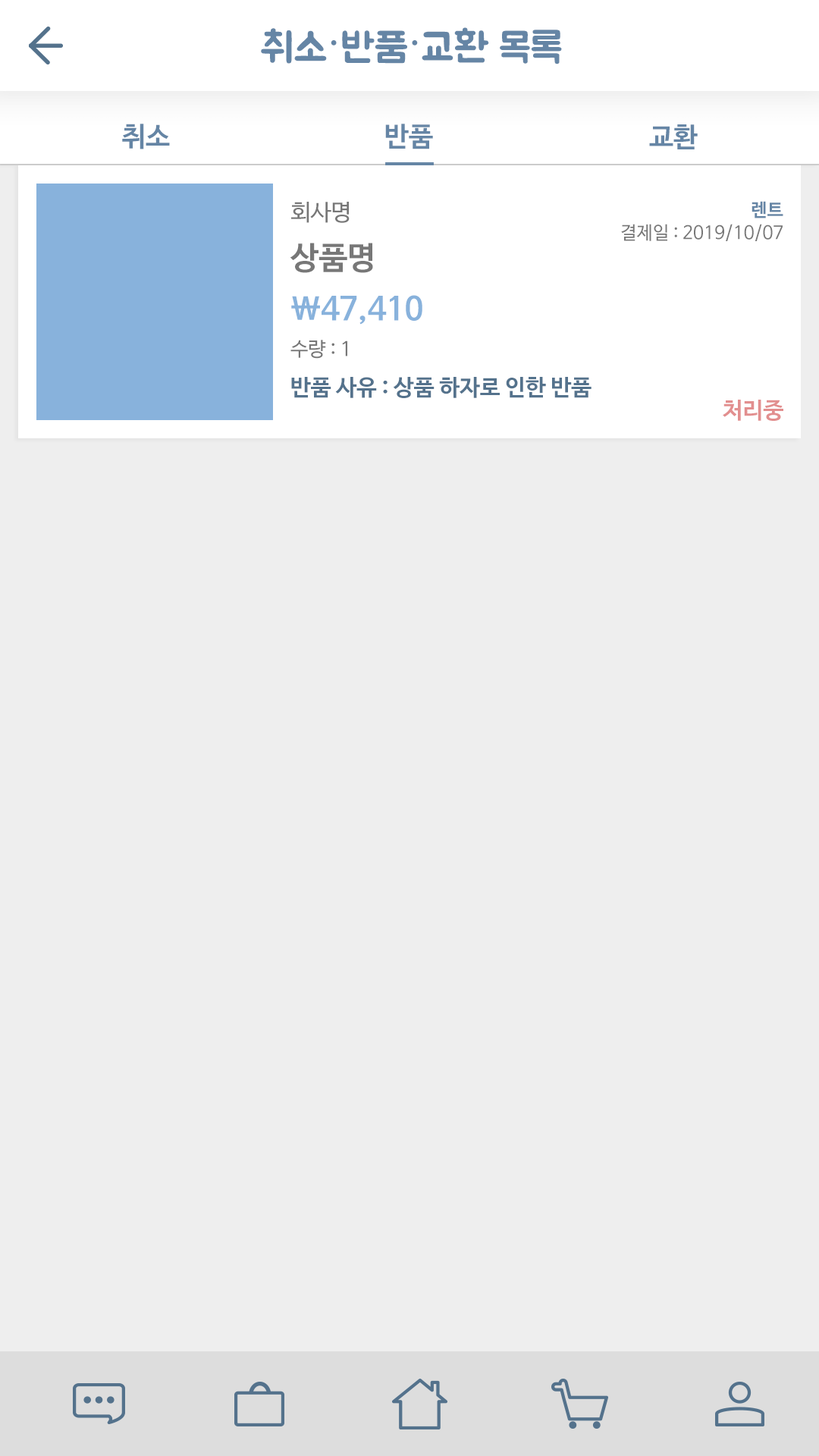
<style>
.page{position:relative;width:819px;height:1456px;background:#eeeeee}
.page>*{position:absolute;margin:0}
.t1{font:40.9px "BMJUA";color:#6585a5}
.t2{font:40.9px "OSeongandHanEum-Regular";color:#6585a5}
.t3{font:27.3px "NanumBarunGothicBold";color:#6585a5}
.t4{font:22.7px "NanumBarunGothic";color:#777777}
.t5{font:18.2px "NanumBarunGothicBold";color:#6585a5}
.t6{font:18.2px "NanumBarunGothic";color:#777777}
.t7{font:31.8px "NanumBarunGothicBold";color:#777777}
.t8{font:31.8px "NanumBarunGothicBold";color:#88b2dc}
.t9{font:19.7px "NanumBarunGothic";color:#777777}
.t10{font:22.7px "NanumBarunGothicBold";color:#54728c}
.t11{font:22.7px "NanumBarunGothicBold";color:#e28f8f}
</style>
<div class="page">
<p class="t1" style="left:261px;top:27px;width:301px;height:37px">취소<span class="t2">·</span>반품<span class="t2">·</span>교환 목록</p>
<p class="t3" style="left:122px;top:124px;width:48px;height:25px">취소</p>
<p class="t3" style="left:385px;top:124px;width:48px;height:25px">반품</p>
<p class="t3" style="left:649px;top:124px;width:49px;height:25px">교환</p>
<p class="t4" style="left:291px;top:202px;width:59px;height:21px">회사명</p>
<p class="t5" style="left:751px;top:201px;width:32px;height:17px">렌트</p>
<p class="t6" style="left:621px;top:224px;width:162px;height:17px">결제일 : 2019/10/07</p>
<p class="t7" style="left:290px;top:243px;width:83px;height:30px">상품명</p>
<p class="t8" style="left:291px;top:295px;width:131px;height:30px">\47,410</p>
<p class="t9" style="left:290px;top:340px;width:57px;height:19px">수량 : 1</p>
<p class="t10" style="left:291px;top:377px;width:300px;height:21px">반품 사유 : 상품 하자로 인한 반품</p>
<p class="t11" style="left:723px;top:400px;width:60px;height:21px">처리중</p>
</div>
